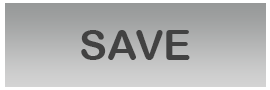
<style>
.page{position:relative;width:270px;height:90px}
.page>*{position:absolute;margin:0}
.t1{font:41.7px "ArialRoundedMTBold";color:#424242}
</style>
<div class="page">
<p class="t1" style="left:81px;top:30px;width:109px;height:30px">SAVE</p>
</div>
